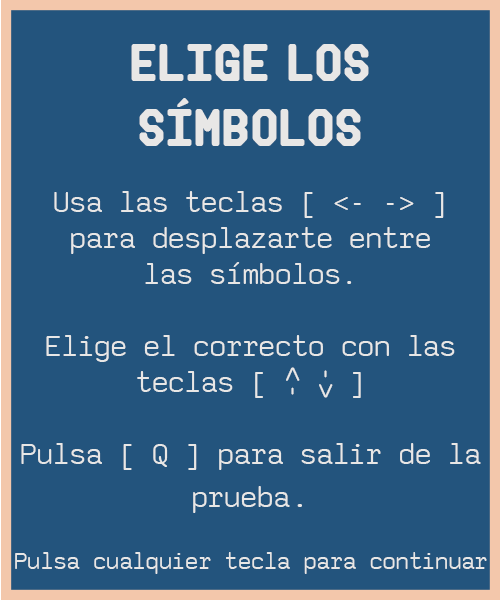
<style>
.page{position:relative;width:500px;height:600px;background:#23547d}
.page>*{position:absolute;margin:0}
.t1{font:54px "Makisupa";color:#e8e7e6}
.t2{font:30px "saxMono";color:#e8e7e6}
.t3{font:36px "saxMono";color:#e8e7e6}
.t4{font:24px "saxMono";color:#e8e7e6}
</style>
<div class="page">
<p class="t1" style="left:131px;top:44px;width:238px;height:102px;text-align:center">elige los<br>símbolos</p>
<p class="t2" style="left:21px;top:191px;width:460px;height:322px;text-align:center">Usa las teclas [ &lt;- -&gt; ]<br>para desplazarte entre<br>las símbolos.<br><br>Elige el correcto con las<br>teclas [ W S ]<br><br>Pulsa [ Q ] para salir de la<br>prueba<span class="t3">.</span></p>
<p class="t2" style="left:286px;top:367px;width:14px;height:28px;rotate:90deg">&lt;-</p>
<p class="t2" style="left:319px;top:370px;width:14px;height:28px;rotate:-90deg">&lt;-</p>
<p class="t4" style="left:15px;top:552px;width:472px;height:22px">Pulsa cualquier tecla para continuar</p>
</div>
